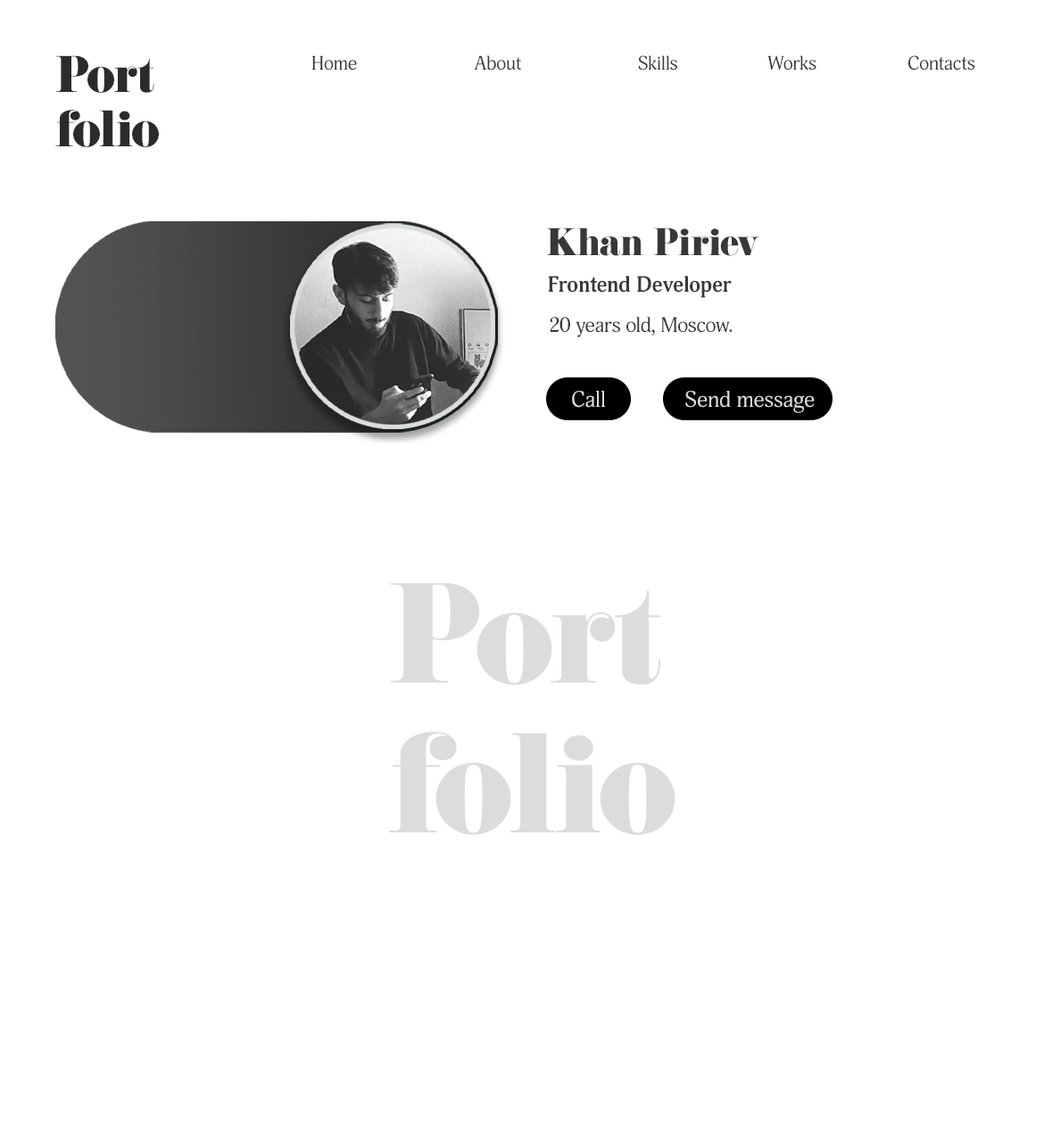
<style>
.page{position:relative;width:1044px;height:1142px;background:#ffffff}
.page>*{position:absolute;margin:0}
.t1{font:45.1px "EloquentJFPro-Regular";color:#2b2b2b}
.t2{font:19.1px "Adonis-Regular";color:#383838}
.t3{font:33.9px "EloquentJFPro-Regular";color:#383838}
.t4{font:22.2px "Adonis-Bold";color:#383838}
.t5{font:20.7px "Adonis-Regular";color:#383838}
.t6{font:22.2px "Adonis-Regular";letter-spacing:0.01em;color:#dcdcdc}
.t7{font:124.4px "EloquentJFPro-Regular";color:#dcdcdc}
</style>
<div class="page">
<p class="t1" style="left:55px;top:55px;width:104px;height:92px">Port<br>folio</p>
<p class="t2" style="left:311px;top:55px;width:46px;height:15px">Home</p>
<p class="t2" style="left:474px;top:55px;width:47px;height:15px">About</p>
<p class="t2" style="left:638px;top:55px;width:39px;height:15px">Skills</p>
<p class="t2" style="left:767px;top:55px;width:49px;height:15px">Works</p>
<p class="t2" style="left:908px;top:55px;width:67px;height:15px">Contacts</p>
<p class="t3" style="left:547px;top:228px;width:212px;height:28px">Khan Piriev</p>
<p class="t4" style="left:548px;top:276px;width:184px;height:22px">Frontend Developer</p>
<p class="t5" style="left:550px;top:317px;width:183px;height:20px">20 years old, Moscow.</p>
<p class="t6" style="left:572px;top:391px;width:33px;height:17px">Call</p>
<p class="t6" style="left:685px;top:391px;width:130px;height:22px">Send message</p>
<p class="t7" style="left:389px;top:583px;width:286px;height:252px">Port<br>folio</p>
</div>
